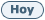
<style>
.page{position:relative;width:45px;height:20px;background:#edf3f8}
.page>*{position:absolute;margin:0}
.t1{font:11.1px "Verdana-Bold";color:#43637a}
</style>
<div class="page">
<p class="t1" style="left:11px;top:5px;width:24px;height:11px">Hoy</p>
</div>
